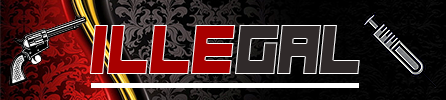
<style>
.page{position:relative;width:446px;height:100px}
.page>*{position:absolute;margin:0}
.t1{font:70.9px "Hindsight2020";color:#a80000;scale:0.94 1}
.t2{font:70.9px "Hindsight2020";color:#302a2a;scale:0.94 1}
</style>
<div class="page">
<p class="t1" style="left:90px;top:25px;width:146px;height:49px">ille</p>
<p class="t2" style="left:235px;top:25px;width:125px;height:49px">gal</p>
</div>
